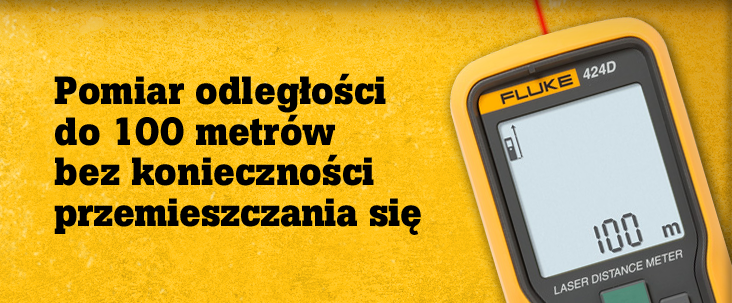
<style>
.page{position:relative;width:732px;height:303px}
.page>*{position:absolute;margin:0}
.t1{font:39px/30px "BotonPro-Bold";letter-spacing:-0.01em;color:#000000}
</style>
<div class="page">
<p class="t1" style="left:54px;top:73px;width:367px;height:162px">Pomiar odległości <br>do 100 metrów <br>bez konieczności <br>przemieszczania się</p>
</div>
